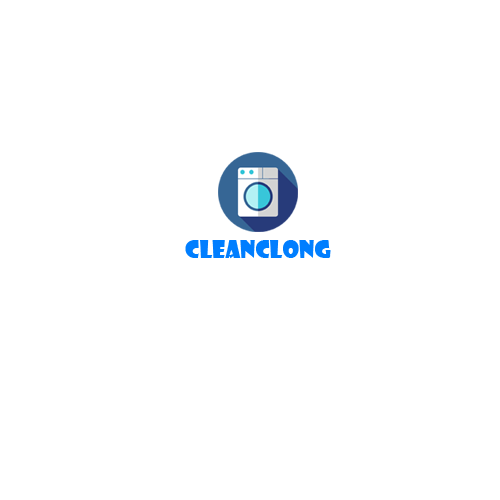
<style>
.page{position:relative;width:500px;height:500px;background:#ffffff}
.page>*{position:absolute;margin:0}
.t1{font:24px "ShowcardGothic-Reg";color:#007eff}
</style>
<div class="page">
<p class="t1" style="left:185px;top:240px;width:146px;height:19px">cleanclong</p>
</div>
